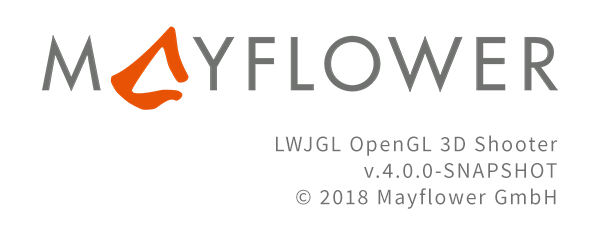
<style>
.page{position:relative;width:600px;height:235px;background:#ffffff}
.page>*{position:absolute;margin:0}
.t1{font:22px "SourceSansPro-Regular";letter-spacing:0.08em;color:#707270}
</style>
<div class="page">
<p class="t1" style="left:276px;top:135px;width:282px;height:74px;text-align:right">LWJGL OpenGL 3D Shooter<br>v.4.0.0-SNAPSHOT<br>© 2018 Mayflower GmbH</p>
</div>
